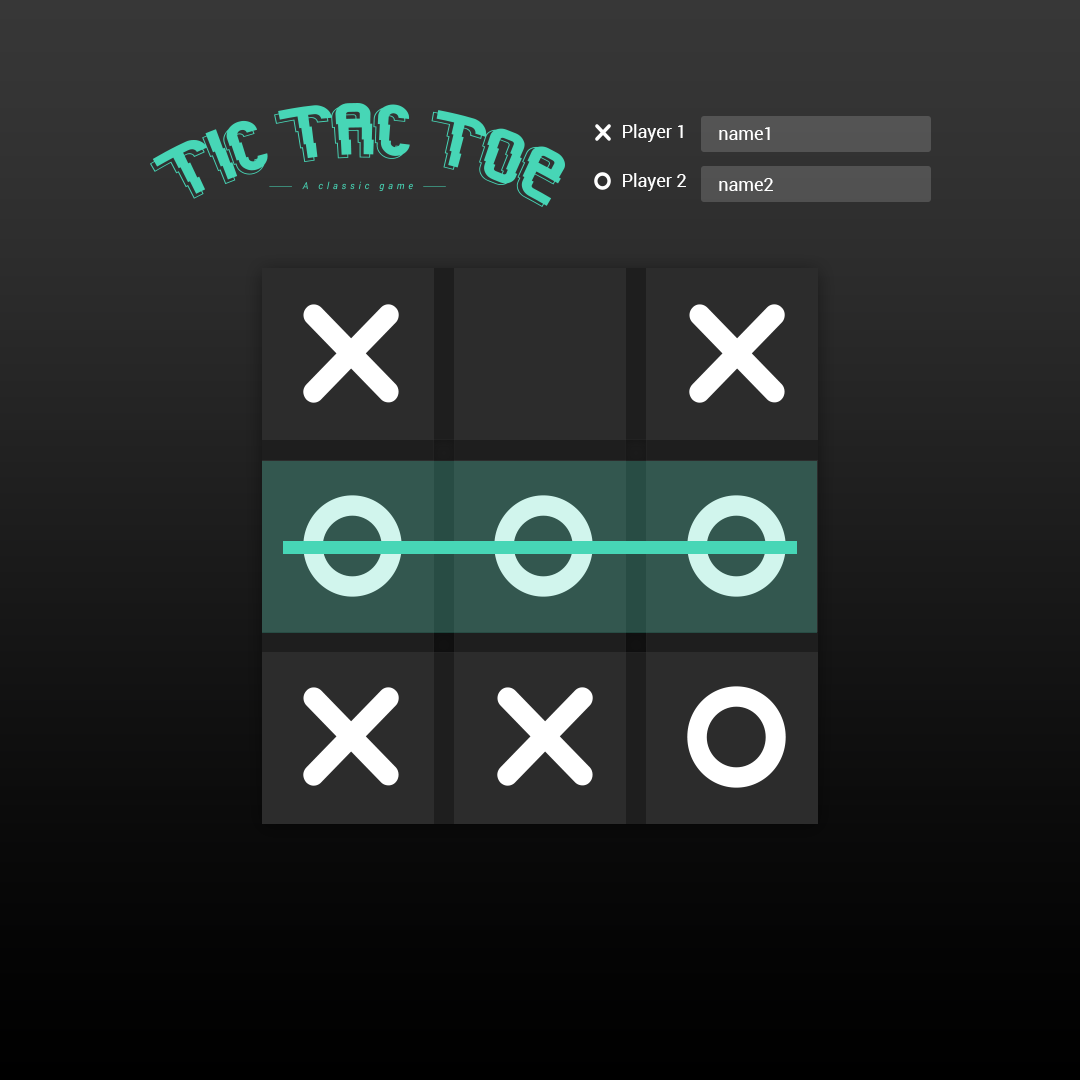
<style>
.page{position:relative;width:1080px;height:1080px}
.page>*{position:absolute;margin:0}
.t1{font:18px "Roboto-Regular";color:#ffffff}
</style>
<div class="page">
<p class="t1" style="left:623px;top:124px;width:60px;height:18px">Player 1</p>
<p class="t1" style="left:719px;top:127px;width:51px;height:13px">name1</p>
<p class="t1" style="left:623px;top:173px;width:63px;height:18px">Player 2</p>
<p class="t1" style="left:719px;top:178px;width:54px;height:13px">name2</p>
</div>
